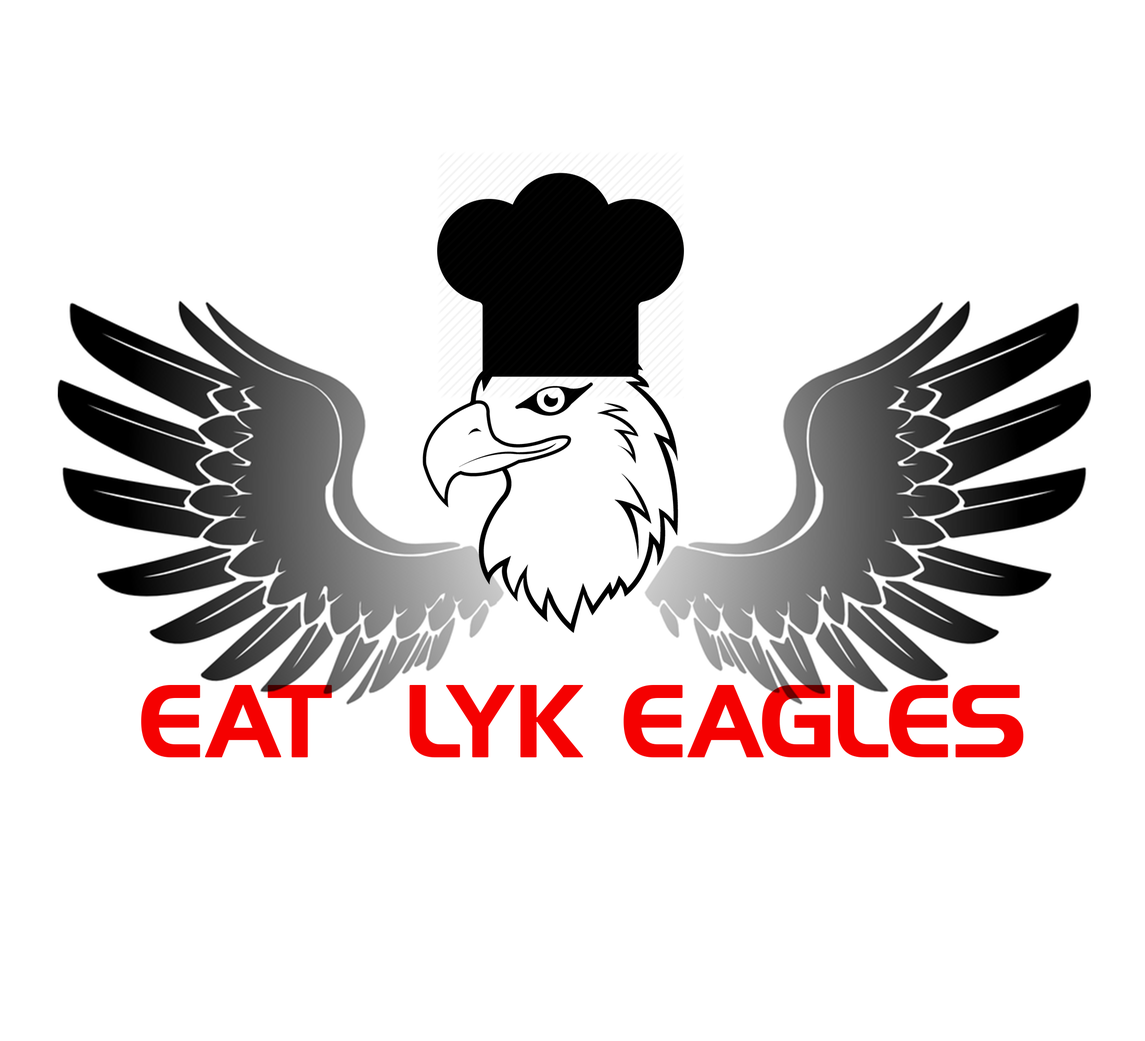
<style>
.page{position:relative;width:1145px;height:1041px;background:#ffffff}
.page>*{position:absolute;margin:0}
.t1{font:91.8px "HighlandGothicFLF";color:#f50101;font-weight:bold}
</style>
<div class="page">
<p class="t1" style="left:141px;top:685px;width:883px;height:72px">EAT  LYK EAGLES</p>
</div>
